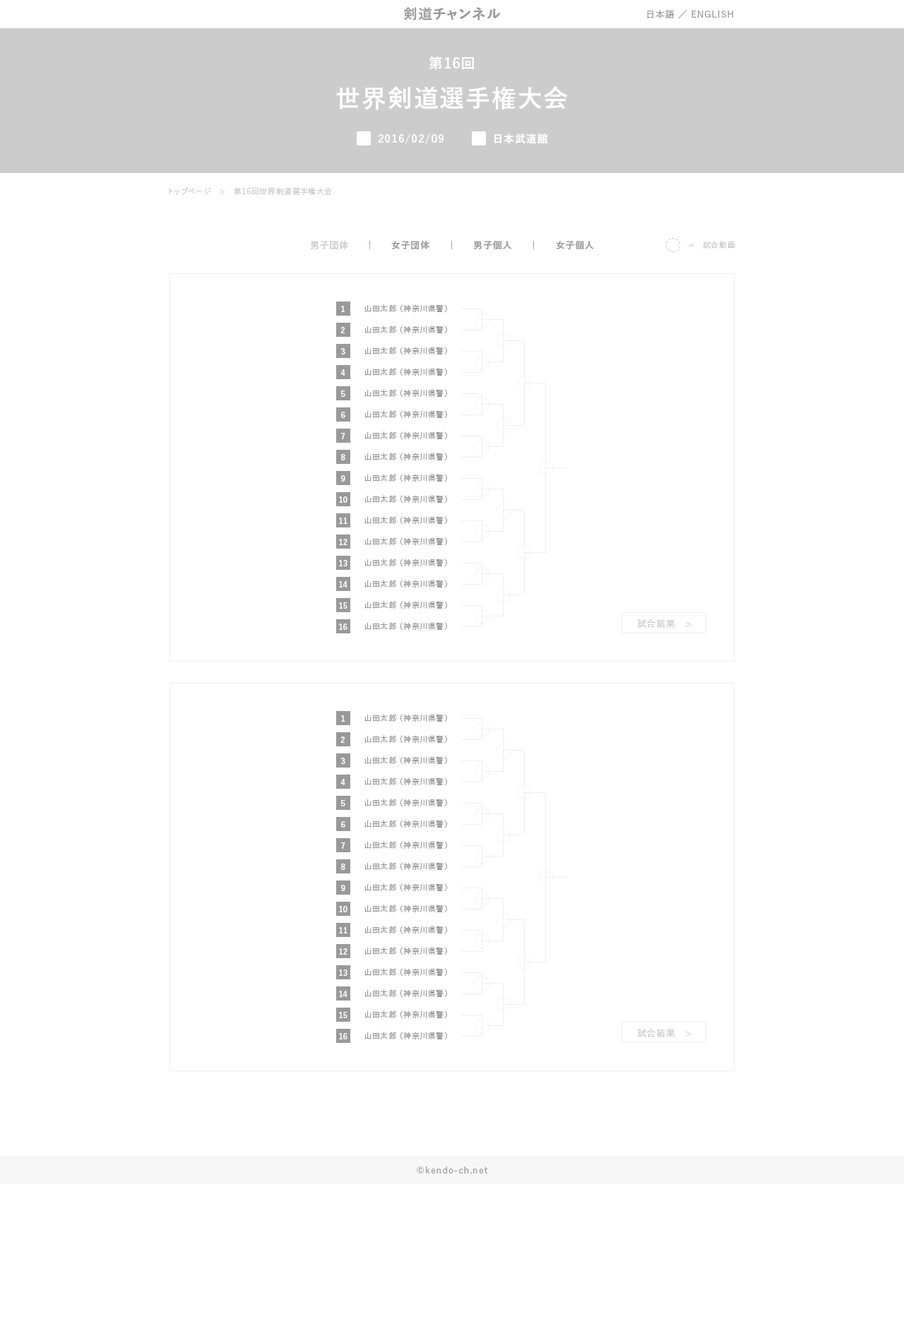
<style>
.page{position:relative;width:904px;height:1319px;background:#ffffff}
.page>*{position:absolute;margin:0}
.t1{font:14.1px "YuGo-Bold";letter-spacing:0.05em;color:#999999}
.t2{font:9.2px "YuGo-Medium";letter-spacing:0.05em;color:#999999}
.t3{font:24.7px/38.8px "YuGo-Bold";letter-spacing:0.05em;color:#ffffff}
.t4{font:14.1px/38.8px "YuGo-Bold";letter-spacing:0.05em;color:#ffffff}
.t5{font:10.6px "YuGo-Bold";letter-spacing:0.05em;color:#ffffff}
.t6{font:7.8px "YuGo-Medium";letter-spacing:0.05em;color:#cccccc}
.t7{font:9.2px "YuGo-Bold";letter-spacing:0.05em;color:#999999}
.t8{font:9.2px "YuGo-Bold";letter-spacing:0.05em;color:#cccccc}
.t9{font:7.8px/21.2px "YuGo-Medium";letter-spacing:0.05em;color:#999999}
.t10{font:9.2px "YuGo-Medium";letter-spacing:0.05em;color:#cccccc}
</style>
<div class="page">
<p class="t1" style="left:403px;top:7px;width:98px;height:13px">剣道チャンネル</p>
<p class="t2" style="left:647px;top:10px;width:86px;height:9px">日本語 ／ ENGLISH</p>
<p class="t3" style="left:336px;top:56px;width:232px;height:54px;text-align:center"><span class="t4">第16回<br></span>世界剣道選手権大会</p>
<p class="t5" style="left:378px;top:133px;width:65px;height:11px">2016/02/09</p>
<p class="t5" style="left:494px;top:133px;width:54px;height:11px">日本武道館</p>
<p class="t6" style="left:169px;top:187px;width:163px;height:9px">トップページ　&gt;　第16回世界剣道選手権大会</p>
<p class="t7" style="left:310px;top:240px;width:284px;height:10px"><span class="t8">男子団体　</span>　|　　女子団体　　｜　　男子個人　　｜　　女子個人</p>
<p class="t6" style="left:689px;top:241px;width:45px;height:8px">=　試合動画</p>
<p class="t9" style="left:364px;top:304px;width:83px;height:327px">山田太郎 （神奈川県警）<br>山田太郎 （神奈川県警）<br>山田太郎 （神奈川県警）<br>山田太郎 （神奈川県警）<br>山田太郎 （神奈川県警）<br>山田太郎 （神奈川県警）<br>山田太郎 （神奈川県警）<br>山田太郎 （神奈川県警）<br>山田太郎 （神奈川県警）<br>山田太郎 （神奈川県警）<br>山田太郎 （神奈川県警）<br>山田太郎 （神奈川県警）<br>山田太郎 （神奈川県警）<br>山田太郎 （神奈川県警）<br>山田太郎 （神奈川県警）<br>山田太郎 （神奈川県警）</p>
<p class="t10" style="left:637px;top:619px;width:54px;height:9px">試合結果　&gt;</p>
<p class="t9" style="left:364px;top:714px;width:83px;height:326px">山田太郎 （神奈川県警）<br>山田太郎 （神奈川県警）<br>山田太郎 （神奈川県警）<br>山田太郎 （神奈川県警）<br>山田太郎 （神奈川県警）<br>山田太郎 （神奈川県警）<br>山田太郎 （神奈川県警）<br>山田太郎 （神奈川県警）<br>山田太郎 （神奈川県警）<br>山田太郎 （神奈川県警）<br>山田太郎 （神奈川県警）<br>山田太郎 （神奈川県警）<br>山田太郎 （神奈川県警）<br>山田太郎 （神奈川県警）<br>山田太郎 （神奈川県警）<br>山田太郎 （神奈川県警）</p>
<p class="t10" style="left:637px;top:1028px;width:54px;height:9px">試合結果　&gt;</p>
<p class="t2" style="left:417px;top:1167px;width:71px;height:7px">©kendo-ch.net</p>
</div>
